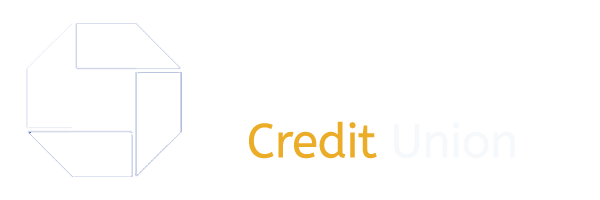
<style>
.page{position:relative;width:600px;height:200px;background:#ffffff}
.page>*{position:absolute;margin:0}
.t1{font:48px "ABeeZee-Regular";letter-spacing:-0.01em;color:#ebad28}
.t2{font:48px "ABeeZee-Regular";letter-spacing:-0.01em;color:#f6f9fb}
</style>
<div class="page">
<p class="t1" style="left:249px;top:121px;width:266px;height:38px">Credit <span class="t2">Union</span></p>
</div>
